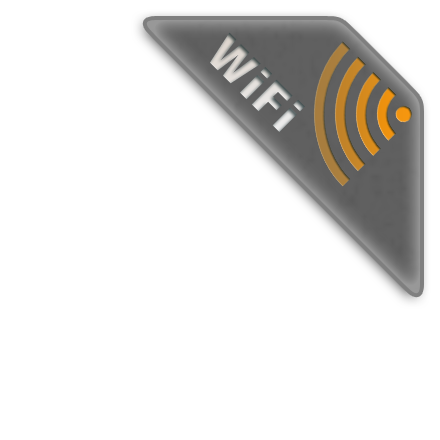
<style>
.page{position:relative;width:440px;height:440px;background:#ffffff}
.page>*{position:absolute;margin:0}
.t1{font:48px "mplus-1p-black"}
</style>
<div class="page">
<p class="t1" style="left:210px;top:32px;width:95px;height:100px;rotate:45deg">WiFi</p>
</div>
